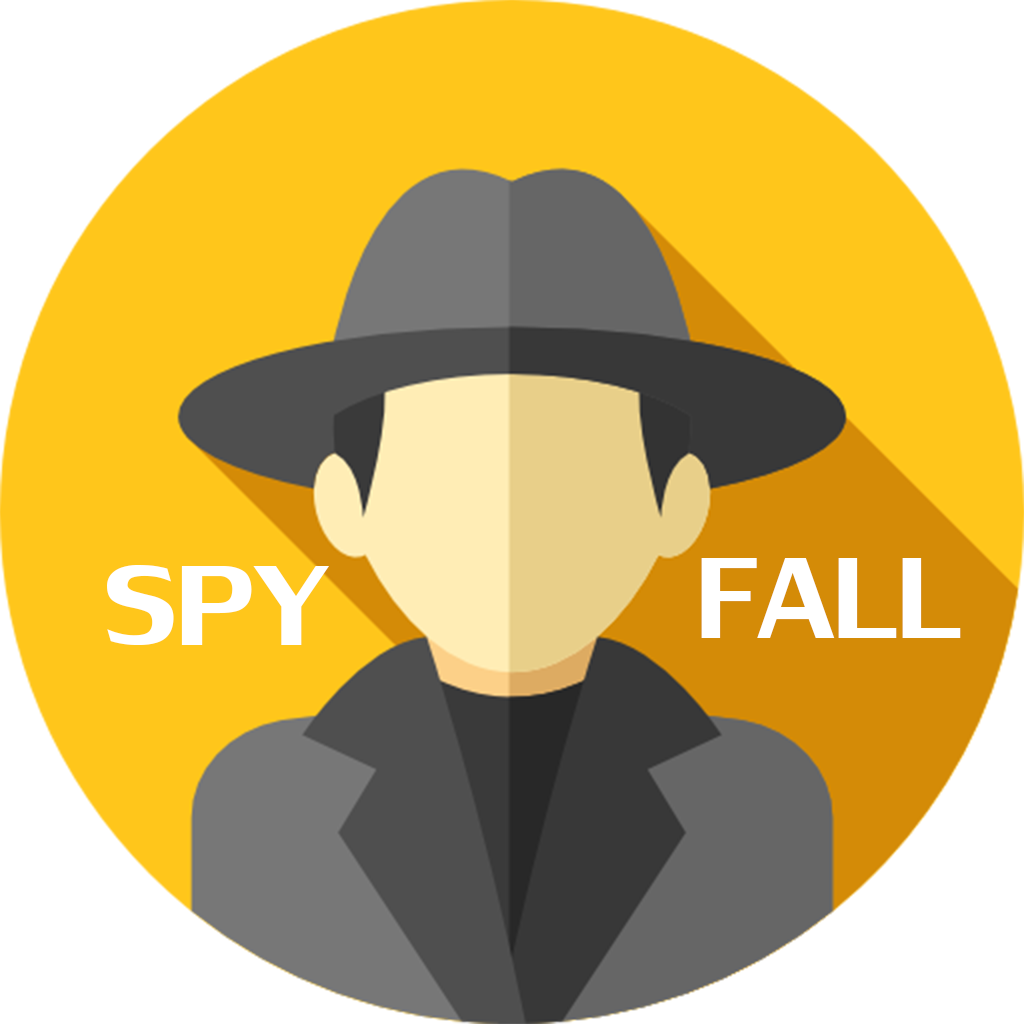
<style>
.page{position:relative;width:1024px;height:1024px;background:#ffc61b}
.page>*{position:absolute;margin:0}
.t1{font:173.2px "LilyUPC";color:#ffffff}
.t2{font:169.6px "LilyUPC";color:#ffffff;scale:1.1 1}
</style>
<div class="page">
<p class="t1" style="left:701px;top:558px;width:260px;height:80px">FALL</p>
<p class="t2" style="left:107px;top:565px;width:222px;height:80px">SPY</p>
</div>
